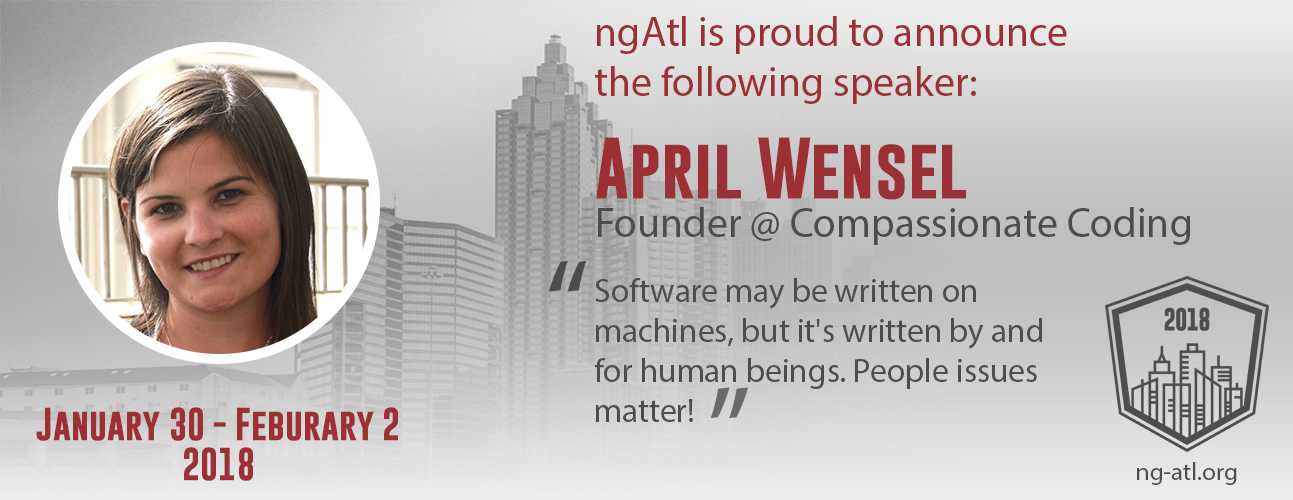
<style>
.page{position:relative;width:1293px;height:500px}
.page>*{position:absolute;margin:0}
.t1{font:41.7px "MyriadPro-Regular";color:#9d3035}
.t2{font:62.5px "GoboldBold";color:#9d3035}
.t3{font:41.7px "MyriadPro-Regular";color:#4d4d4e}
.t4{font:125px "MyriadPro-Regular";color:#4d4d4e}
.t5{font:33.3px "MyriadPro-Regular";color:#4d4d4e}
.t6{font:125px "MyriadPro-Regular";color:#6a6a6b}
.t7{font:33.3px "GoboldBold";color:#9d3035}
.t8{font:25px "MyriadPro-Regular";color:#4d4d4e}
</style>
<div class="page">
<p class="t1" style="left:595px;top:16px;width:472px;height:88px">ngAtl is proud to announce the following speaker:</p>
<p class="t2" style="left:596px;top:137px;width:370px;height:63px">April Wensel</p>
<p class="t3" style="left:598px;top:207px;width:593px;height:38px">Founder @ Compassionate Coding</p>
<p class="t4" style="left:549px;top:260px;width:38px;height:32px">“</p>
<p class="t5" style="left:594px;top:278px;width:448px;height:144px">Software may be written on machines, but it's written by and for human beings. People issues matter!</p>
<p class="t6" style="left:710px;top:387px;width:38px;height:32px;rotate:180deg">“</p>
<p class="t7" style="left:36px;top:407px;width:362px;height:74px;text-align:center">January 30 - Feburary 2 <br>2018</p>
<p class="t8" style="left:1137px;top:462px;width:100px;height:23px">ng-atl.org</p>
</div>
